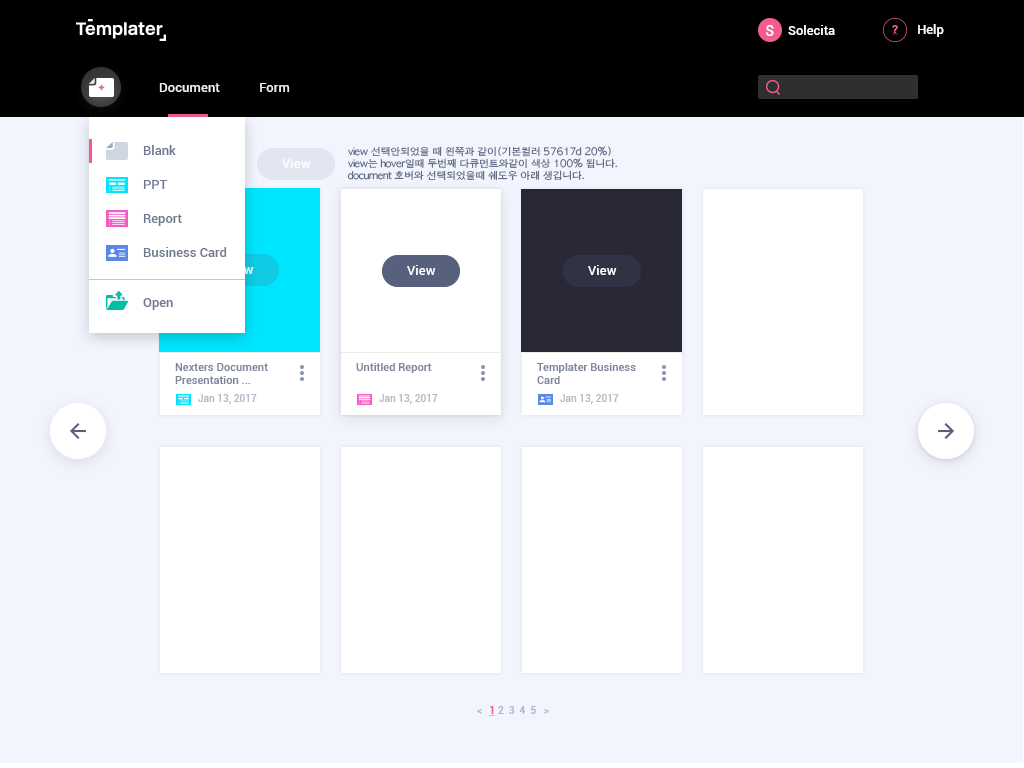
<style>
.page{position:relative;width:1024px;height:768px;background:#f2f5fe}
.page>*{position:absolute;margin:0}
.t1{font:14.2px "Roboto-Medium";color:#ffffff}
.t2{font:13px "Roboto-Medium";color:#ffffff}
.t3{font:13px/17px "Roboto-Medium";color:#70788f}
.t4{font:10px "AppleGothic";letter-spacing:-0.025em;color:#57617d}
.t5{font:11px "Roboto-Medium";color:#6a7490}
.t6{font:10px "Roboto-Medium";color:#b5b9c5}
.t7{font:10px "Roboto-Medium";color:#aeb4c5}
.t8{font:10.1px "Roboto-Medium";color:#f45b92;text-decoration:underline}
</style>
<div class="page">
<p class="t1" style="left:766px;top:25px;width:8px;height:11px">S</p>
<p class="t2" style="left:788px;top:25px;width:47px;height:10px">Solecita</p>
<p class="t2" style="left:918px;top:24px;width:26px;height:13px">Help</p>
<p class="t2" style="left:159px;top:83px;width:131px;height:9px;opacity:0.89">Document            Form</p>
<p class="t3" style="left:143px;top:145px;width:84px;height:165px">Blank<br><br>PPT<br><br>Report<br><br>Business Card<br><br><br><br>Open</p>
<p class="t4" style="left:347px;top:146px;width:270px;height:35px">view 선택안되었을 때 왼쪽과 같이(기본컬러 57617d 20%) <br>view는 hover일때 두번째 다큐먼트와같이 색상 100% 됩니다. <br>document 호버와 선택되었을때 쉐도우 아래 생깁니다.</p>
<p class="t2" style="left:282px;top:158px;width:29px;height:10px">View</p>
<p class="t2" style="left:407px;top:265px;width:29px;height:10px">View</p>
<p class="t2" style="left:588px;top:265px;width:29px;height:10px">View</p>
<p class="t5" style="left:175px;top:363px;width:93px;height:21px;opacity:0.89">Nexters Document<br>Presentation ...</p>
<p class="t5" style="left:356px;top:363px;width:76px;height:10px;opacity:0.89">Untitled Report</p>
<p class="t5" style="left:537px;top:363px;width:99px;height:21px;opacity:0.89">Templater Business<br>Card</p>
<p class="t6" style="left:198px;top:394px;width:59px;height:10px">Jan 13, 2017</p>
<p class="t6" style="left:379px;top:394px;width:59px;height:10px">Jan 13, 2017</p>
<p class="t6" style="left:560px;top:394px;width:59px;height:10px">Jan 13, 2017</p>
<p class="t7" style="left:477px;top:706px;width:72px;height:8px">&lt;   1 2  3  4  5   &gt;</p>
<p class="t8" style="left:489px;top:706px;width:6px;height:10px">1</p>
</div>
